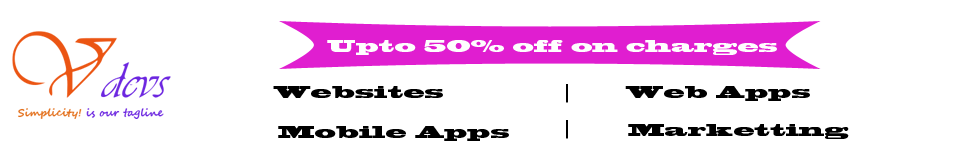
<style>
.page{position:relative;width:960px;height:150px;background:#ffffff}
.page>*{position:absolute;margin:0}
.t1{font:16px "BlackoakStd";color:#fefefe}
.t2{font:16px "BlackoakStd";color:#000000}
</style>
<div class="page">
<p class="t1" style="left:327px;top:40px;width:450px;height:15px">Upto 50% off on charges</p>
<p class="t2" style="left:273px;top:86px;width:170px;height:12px">Websites</p>
<p class="t2" style="left:566px;top:84px;width:2px;height:19px">|</p>
<p class="t2" style="left:625px;top:86px;width:185px;height:15px">Web Apps</p>
<p class="t2" style="left:278px;top:126px;width:231px;height:15px">Mobile Apps</p>
<p class="t2" style="left:566px;top:120px;width:2px;height:19px">|</p>
<p class="t2" style="left:628px;top:124px;width:221px;height:15px">Marketting</p>
</div>
